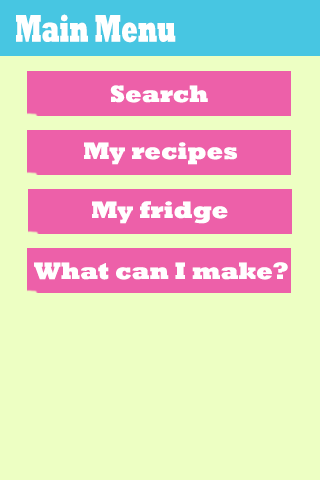
<style>
.page{position:relative;width:320px;height:480px;background:#edffc3}
.page>*{position:absolute;margin:0}
.t1{font:38.8px "Rockwell-ExtraBold";color:#ffffff;scale:0.62 1}
.t2{font:24px "Rockwell-ExtraBold";color:#ffffff}
</style>
<div class="page">
<p class="t1" style="left:16px;top:14px;width:160px;height:29px">Main Menu</p>
<p class="t2" style="left:110px;top:85px;width:98px;height:18px">Search</p>
<p class="t2" style="left:84px;top:142px;width:153px;height:23px">My recipes</p>
<p class="t2" style="left:92px;top:201px;width:136px;height:23px">My fridge</p>
<p class="t2" style="left:34px;top:262px;width:254px;height:18px">What can I make?</p>
</div>
